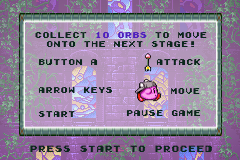
<style>
.page{position:relative;width:240px;height:160px}
.page>*{position:absolute;margin:0}
.t1{font:7.5px "GamegirlClassic";color:#0a271c}
.t2{font:7.5px "GamegirlClassic";color:#4f1ebe}
.t3{font:8.3px "GamegirlClassic";color:#0a271c}
</style>
<div class="page">
<p class="t1" style="left:35px;top:32px;width:172px;height:15px;text-align:center">COLLECT <span class="t2">10 ORBS</span> TO MOVE<br>ONTO THE NEXT STAGE!</p>
<p class="t1" style="left:38px;top:59px;width:60px;height:6px">BUTTON A</p>
<p class="t1" style="left:156px;top:59px;width:45px;height:6px">ATTACK</p>
<p class="t1" style="left:38px;top:87px;width:75px;height:6px">ARROW KEYS</p>
<p class="t1" style="left:171px;top:88px;width:29px;height:6px">MOVE</p>
<p class="t1" style="left:38px;top:111px;width:37px;height:6px">START</p>
<p class="t1" style="left:126px;top:110px;width:75px;height:6px">PAUSE GAME</p>
<p class="t3" style="left:30px;top:145px;width:182px;height:7px">PRESS START TO PROCEED</p>
</div>
